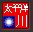
<style>
.page{position:relative;width:33px;height:32px;background:#f20000}
.page>*{position:absolute;margin:0}
.t1{font:10.4px "SimSun";letter-spacing:-0.25em;color:#ffffff}
.t2{font:11.7px "SimSun";color:#ffffff}
</style>
<div class="page">
<p class="t1" style="left:4px;top:4px;width:24px;height:9px">太平洋</p>
<p class="t2" style="left:16px;top:15px;width:11px;height:12px">川</p>
</div>
